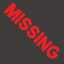
<style>
.page{position:relative;width:64px;height:64px;background:#403b3b}
.page>*{position:absolute;margin:0}
.t1{font:18px "TheNextFont";color:#ed2024}
</style>
<div class="page">
<p class="t1" style="left:3px;top:2px;width:57px;height:57px;rotate:45deg">missing</p>
</div>
